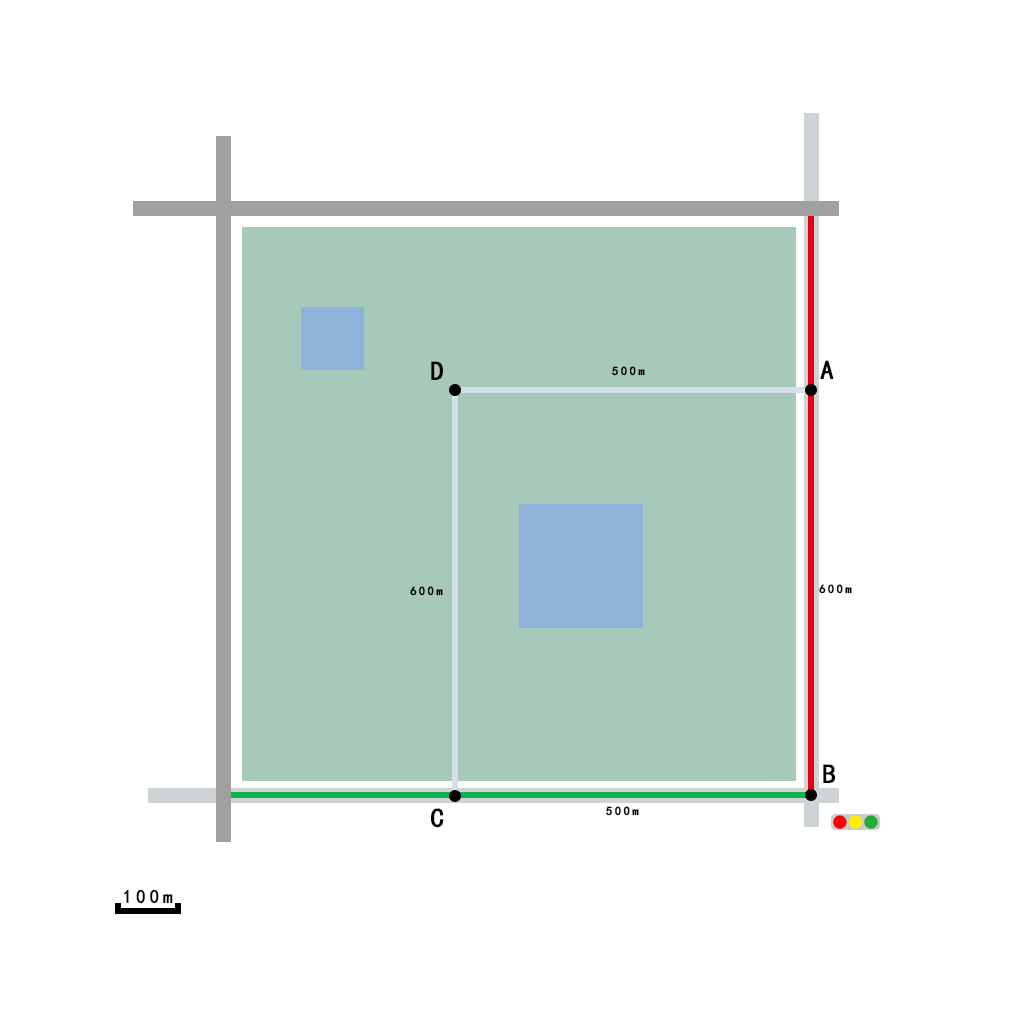
<style>
.page{position:relative;width:1024px;height:1024px;background:#ffffff}
.page>*{position:absolute;margin:0}
.t1{font:26.6px "SimHei";letter-spacing:0.2em;color:#000000;font-weight:bold}
.t2{font:12px "SimHei";letter-spacing:0.2em;color:#000000;font-weight:bold}
.t3{font:18.7px "SimHei";letter-spacing:0.2em;color:#000000;font-weight:bold}
</style>
<div class="page">
<p class="t1" style="left:431px;top:361px;width:12px;height:19px">D</p>
<p class="t2" style="left:612px;top:366px;width:33px;height:10px">500m</p>
<p class="t1" style="left:820px;top:360px;width:14px;height:19px">A</p>
<p class="t2" style="left:410px;top:586px;width:33px;height:10px">600m</p>
<p class="t2" style="left:819px;top:584px;width:33px;height:10px">600m</p>
<p class="t1" style="left:823px;top:764px;width:12px;height:19px">B</p>
<p class="t1" style="left:431px;top:808px;width:13px;height:20px">C</p>
<p class="t2" style="left:606px;top:806px;width:33px;height:10px">500m</p>
<p class="t3" style="left:124px;top:889px;width:49px;height:15px">100m</p>
</div>
